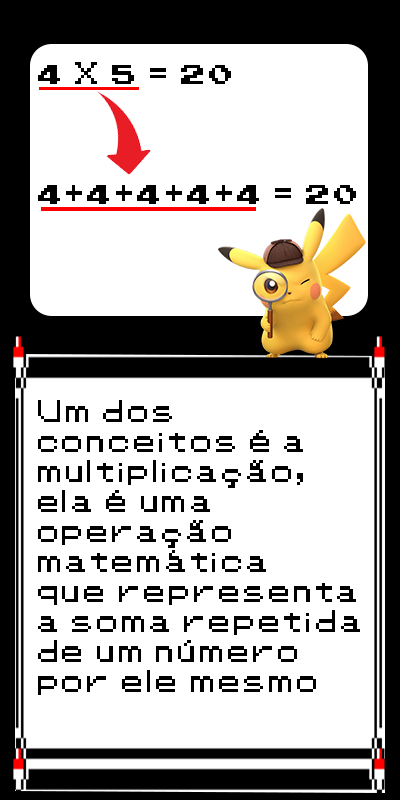
<style>
.page{position:relative;width:400px;height:800px;background:#ffffff}
.page>*{position:absolute;margin:0}
.t1{font:25px "Pokemon-Classic";color:#000000}
</style>
<div class="page">
<p class="t1" style="left:38px;top:62px;width:318px;height:142px">4 X 5 = 20<br><br><br><br>4+4+4+4+4 = 20</p>
<p class="t1" style="left:38px;top:400px;width:322px;height:295px">Um dos <br>conceitos é a<br>multiplicação,<br>ela é uma <br>operação <br>matemática <br>que representa <br>a soma repetida <br>de um número <br>por ele mesmo</p>
</div>
